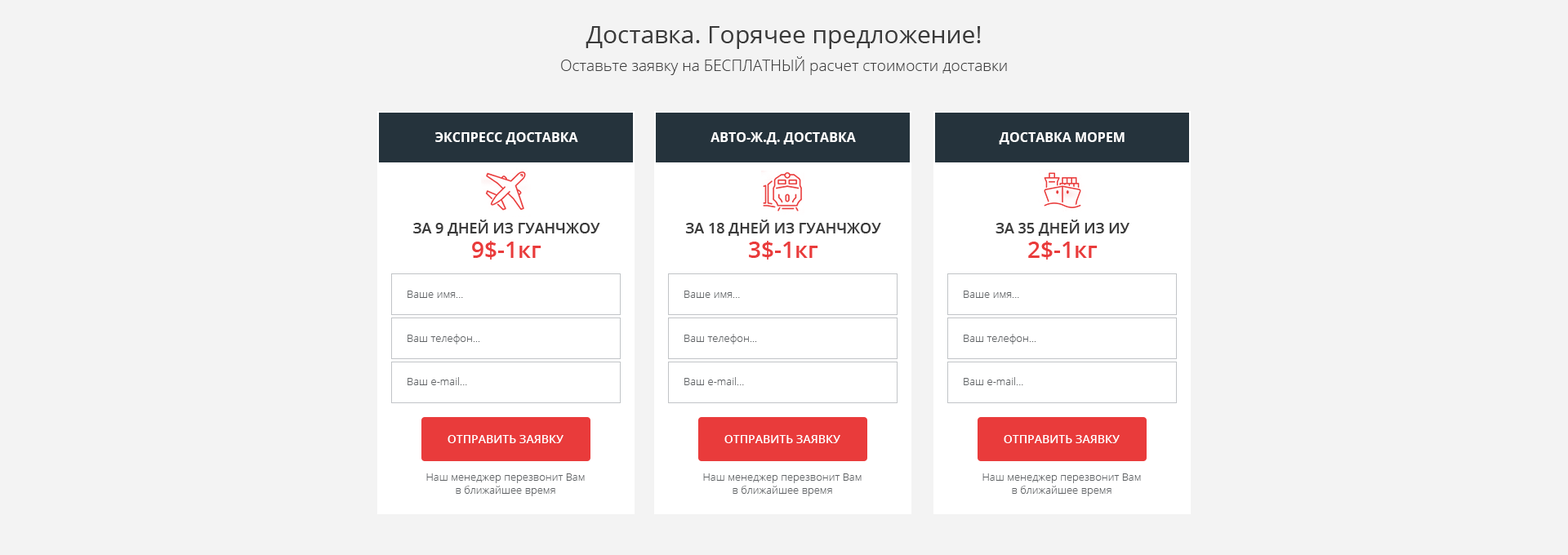
<style>
.page{position:relative;width:1568px;height:555px;background:#f3f3f3}
.page>*{position:absolute;margin:0}
.t1{font:24.5px "OpenSans";color:#3a3a3a}
.t2{font:15.5px "OpenSans-Light";color:#3f3f3f}
.t3{font:13.1px "OpenSans-Bold";color:#ffffff;text-transform:uppercase}
.t4{font:14.7px/18.8px "OpenSans-Semibold";color:#3a3a3a;text-transform:uppercase}
.t5{font:22.9px/24.5px "OpenSans-Semibold";color:#e93b3b}
.t6{font:10.6px "OpenSans-Light";color:#616467}
.t7{font:11.4px "OpenSans-Semibold";color:#ffffff;text-transform:uppercase}
.t8{font:10.6px/13.1px "OpenSans-Light";color:#616467}
</style>
<div class="page">
<p class="t1" style="left:586px;top:26px;width:395px;height:23px">Доставка. Горячее предложение!</p>
<p class="t2" style="left:561px;top:56px;width:446px;height:19px">Оставьте заявку на БЕСПЛАТНЫЙ расчет стоимости доставки</p>
<p class="t3" style="left:435px;top:132px;width:143px;height:13px">Экспресс Доставка</p>
<p class="t3" style="left:710px;top:132px;width:146px;height:13px">АВТО-Ж.Д. Доставка</p>
<p class="t3" style="left:999px;top:132px;width:126px;height:13px">Доставка Морем</p>
<p class="t4" style="left:413px;top:220px;width:187px;height:40px;text-align:center">за 9 дней из Гуанчжоу<br><span class="t5">9$-1кг</span></p>
<p class="t4" style="left:685px;top:220px;width:196px;height:40px;text-align:center">за 18 дней из Гуанчжоу<br><span class="t5">3$-1кг</span></p>
<p class="t4" style="left:996px;top:220px;width:133px;height:40px;text-align:center">за 35 дней из иу<br><span class="t5">2$-1кг</span></p>
<p class="t6" style="left:408px;top:291px;width:55px;height:7px">Ваше имя...</p>
<p class="t6" style="left:684px;top:291px;width:56px;height:7px">Ваше имя...</p>
<p class="t6" style="left:964px;top:291px;width:55px;height:7px">Ваше имя...</p>
<p class="t6" style="left:408px;top:334px;width:72px;height:11px">Ваш телефон...</p>
<p class="t6" style="left:684px;top:334px;width:73px;height:11px">Ваш телефон...</p>
<p class="t6" style="left:964px;top:334px;width:72px;height:11px">Ваш телефон...</p>
<p class="t6" style="left:408px;top:377px;width:59px;height:8px">Ваш e-mail...</p>
<p class="t6" style="left:684px;top:377px;width:60px;height:8px">Ваш e-mail...</p>
<p class="t6" style="left:964px;top:377px;width:59px;height:8px">Ваш e-mail...</p>
<p class="t7" style="left:448px;top:435px;width:116px;height:8px">Отправить заявку</p>
<p class="t7" style="left:724px;top:435px;width:116px;height:8px">Отправить заявку</p>
<p class="t7" style="left:1004px;top:435px;width:116px;height:8px">Отправить заявку</p>
<p class="t8" style="left:426px;top:474px;width:159px;height:23px;text-align:center">Наш менеджер перезвонит Вам<br>в ближайшее время</p>
<p class="t8" style="left:703px;top:474px;width:159px;height:23px;text-align:center">Наш менеджер перезвонит Вам<br>в ближайшее время</p>
<p class="t8" style="left:982px;top:474px;width:159px;height:23px;text-align:center">Наш менеджер перезвонит Вам<br>в ближайшее время</p>
</div>
